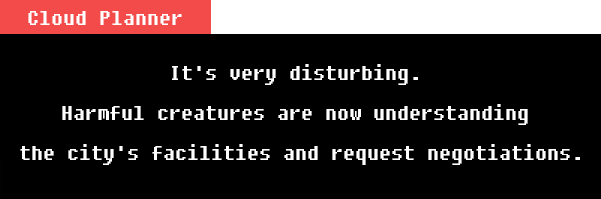
<style>
.page{position:relative;width:601px;height:199px;background:#000000}
.page>*{position:absolute;margin:0}
.t1{font:24px "DungGeunMo";color:#ffffff}
.t2{font:24px/40px "DungGeunMo";color:#ffffff}
</style>
<div class="page">
<p class="t1" style="left:28px;top:11px;width:154px;height:14px">Cloud Planner</p>
<p class="t2" style="left:20px;top:64px;width:560px;height:101px;text-align:center">It's very disturbing. <br>Harmful creatures are now understanding <br>the city's facilities and request negotiations.</p>
</div>
